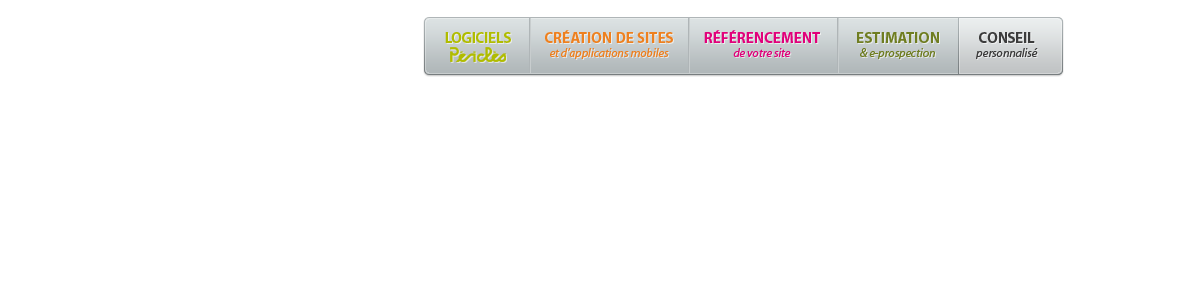
<style>
.page{position:relative;width:1190px;height:281px;background:#ffffff}
.page>*{position:absolute;margin:0}
.t1{font:15px "MyriadPro-Bold";color:#ee801f;text-transform:uppercase}
.t2{font:15px "MyriadPro-Bold";color:#e1007a;text-transform:uppercase}
.t3{font:15px "MyriadPro-Bold";letter-spacing:-0.02em;color:#b0bc00}
.t4{font:15px "MyriadPro-Bold";color:#6f7d21;text-transform:uppercase}
.t5{font:15px "MyriadPro-Bold";letter-spacing:-0.02em;color:#3c3c3c}
.t6{font:12px "MyriadPro-It";color:#ee801f}
.t7{font:12px "MyriadPro-It";color:#e1007a}
.t8{font:12px "MyriadPro-It";color:#6f7d21}
.t9{font:12px "MyriadPro-It";color:#3c3c3c}
</style>
<div class="page">
<p class="t1" style="left:545px;top:30px;width:128px;height:13px">CRéATION DE SITES</p>
<p class="t2" style="left:704px;top:30px;width:116px;height:13px">Référencement</p>
<p class="t3" style="left:445px;top:32px;width:66px;height:11px">LOGICIELS</p>
<p class="t4" style="left:857px;top:32px;width:82px;height:11px">estimation</p>
<p class="t5" style="left:979px;top:32px;width:56px;height:11px">CONSEIL</p>
<p class="t6" style="left:550px;top:47px;width:119px;height:12px">et d’applications mobiles</p>
<p class="t7" style="left:733px;top:48px;width:58px;height:9px">de votre site</p>
<p class="t8" style="left:860px;top:48px;width:75px;height:11px">&amp; e-prospection</p>
<p class="t9" style="left:976px;top:48px;width:62px;height:11px">personnalisé</p>
</div>
